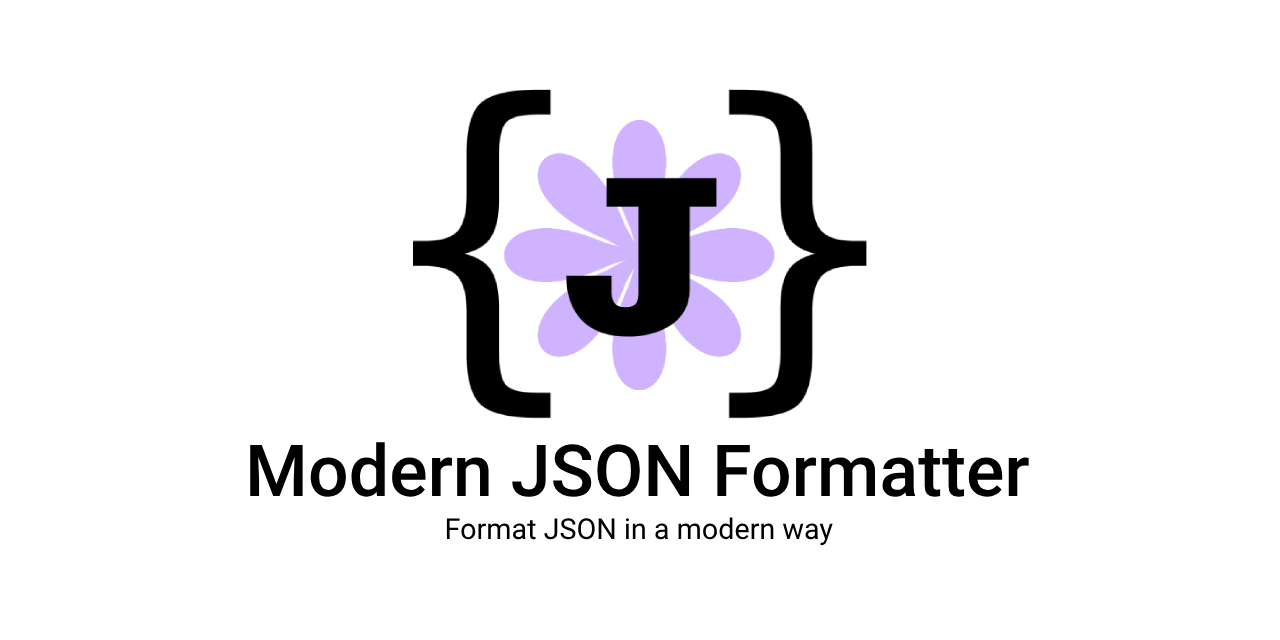
<style>
.page{position:relative;width:1280px;height:640px;background:#ffffff}
.page>*{position:absolute;margin:0}
.t1{font:71.8px "Roboto-Medium";color:#000000}
.t2{font:28.8px "Roboto-Regular";color:#000000}
</style>
<div class="page">
<p class="t1" style="left:250px;top:442px;width:779px;height:55px">Modern JSON Formatter</p>
<p class="t2" style="left:446px;top:517px;width:387px;height:29px">Format JSON in a modern way</p>
</div>
